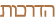
<style>
.page{position:relative;width:55px;height:22px;background:#ffffff}
.page>*{position:absolute;margin:0}
.t1{font:21.6px "MyriadHebrew-Regular";letter-spacing:-0.09em;color:#ad7344}
</style>
<div class="page">
<p class="t1" style="left:0px;top:4px;width:55px;height:13px">תוכרדה</p>
</div>
